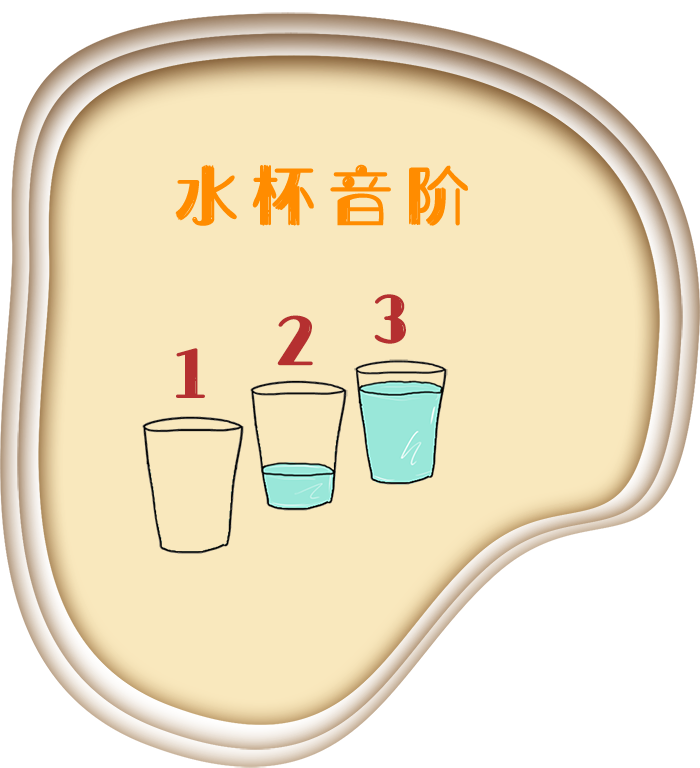
<style>
.page{position:relative;width:700px;height:768px;background:#f9e8bd}
.page>*{position:absolute;margin:0}
.t1{font:64.2px "HYXingQiuTiJ";letter-spacing:0.2em;color:#ff8c00}
.t2{font:64.2px "HYXingQiuTiJ";letter-spacing:0.2em;color:#b53030}
</style>
<div class="page">
<p class="t1" style="left:175px;top:164px;width:293px;height:62px">水杯音阶</p>
<p class="t2" style="left:374px;top:294px;width:32px;height:50px">3</p>
<p class="t2" style="left:277px;top:315px;width:36px;height:51px">2</p>
<p class="t2" style="left:176px;top:348px;width:29px;height:50px">1</p>
</div>
